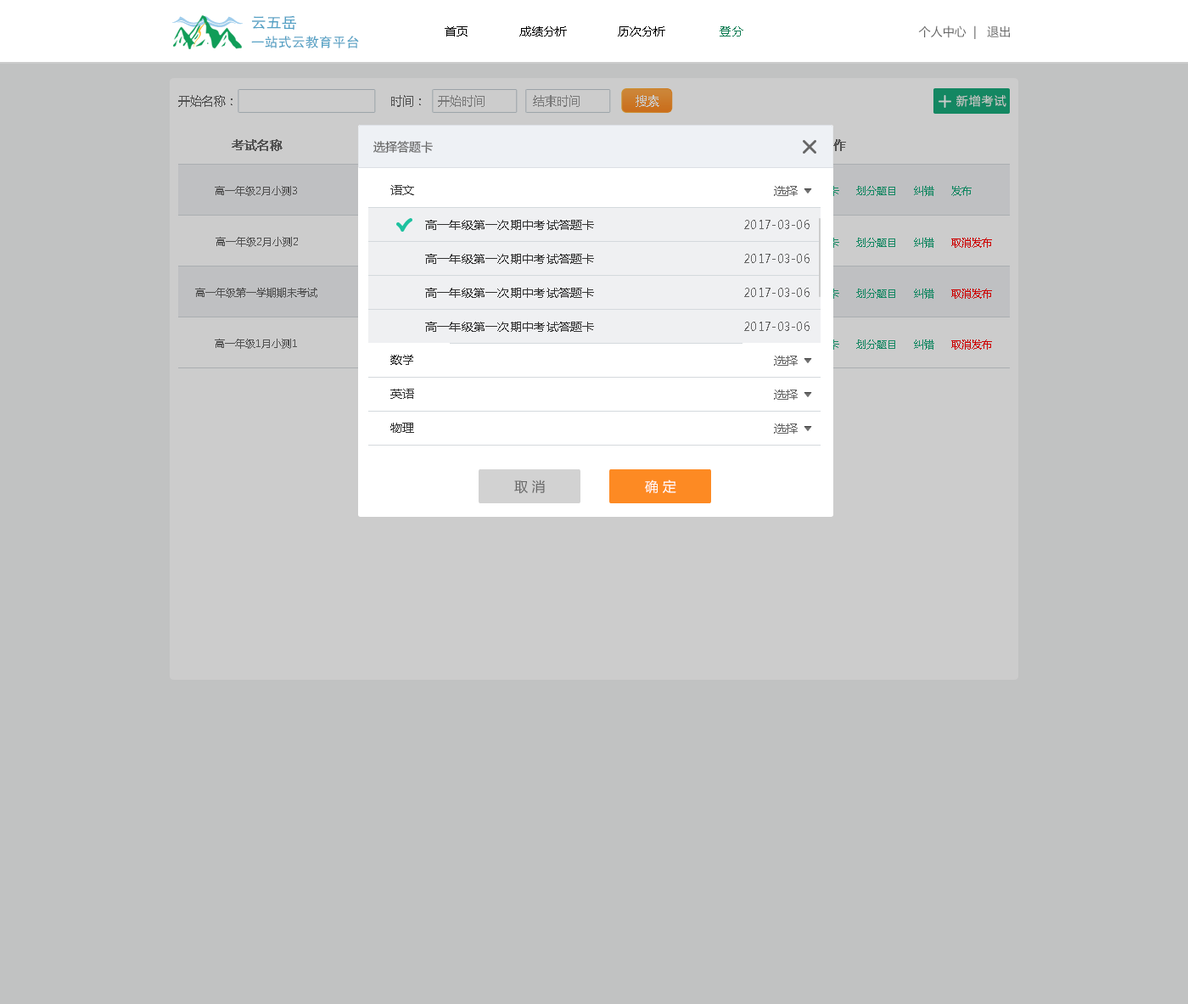
<style>
.page{position:relative;width:1188px;height:1004px;background:#c1c2c2}
.page>*{position:absolute;margin:0}
.t1{font:13.6px/20.4px "FZHTK--GBK1-0";color:#53a0c4}
.t2{font:15.3px/20.4px "FZHTK--GBK1-0";color:#53a0c4}
.t3{font:11.9px "MicrosoftYaHei";color:#000000;text-transform:uppercase}
.t4{font:11.9px "MicrosoftYaHei";color:#107d54;text-transform:uppercase}
.t5{font:11.9px "MicrosoftYaHei";color:#666666;text-transform:uppercase}
.t6{font:11.9px "MicrosoftYaHei";color:#666666}
.t7{font:11.9px "MicrosoftYaHei";color:#7a7a7a}
.t8{font:11.9px "MicrosoftYaHei";color:#cccccc}
.t9{font:11.9px "MicrosoftYaHei";letter-spacing:0.07em;color:#cccccc}
.t10{font:11.9px "MicrosoftYaHei";color:#666666;font-weight:bold}
.t11{font:11.9px "MicrosoftYaHei";font-weight:bold}
.t12{font:10.2px "MicrosoftYaHei";color:#666666}
.t13{font:11.9px "MicrosoftYaHei";letter-spacing:0.02em;color:#333333}
.t14{font:10.2px "MicrosoftYaHei"}
.t15{font:11.9px "MicrosoftYaHei";letter-spacing:0.02em;color:#666666}
.t16{font:13.6px "MicrosoftYaHei";color:#666666;text-transform:uppercase}
.t17{font:13.6px "MicrosoftYaHei";color:#ffffff;text-transform:uppercase}
</style>
<div class="page">
<p class="t1" style="left:251px;top:15px;width:108px;height:33px"><span class="t2">云五岳<br></span>一站式云教育平台</p>
<p class="t3" style="left:445px;top:26px;width:298px;height:10px">首页               成绩分析               历次分析                <span class="t4">登分</span></p>
<p class="t5" style="left:918px;top:25px;width:92px;height:14px">个人中心  |   退出</p>
<p class="t6" style="left:178px;top:95px;width:54px;height:12px">开始名称：</p>
<p class="t6" style="left:391px;top:95px;width:30px;height:12px">时间：</p>
<p class="t7" style="left:438px;top:95px;width:47px;height:12px">开始时间</p>
<p class="t7" style="left:533px;top:95px;width:47px;height:12px">结束时间</p>
<p class="t8" style="left:636px;top:95px;width:23px;height:12px">搜索</p>
<p class="t9" style="left:956px;top:95px;width:50px;height:12px">新增考试</p>
<p class="t10" style="left:232px;top:139px;width:51px;height:12px">考试名称</p>
<p class="t6" style="left:373px;top:141px;width:60px;height:13px">选择答题卡</p>
<p class="t11" style="left:821px;top:139px;width:25px;height:12px">操作</p>
<p class="t12" style="left:215px;top:186px;width:82px;height:10px">高一年级2月小测3</p>
<p class="t13" style="left:390px;top:185px;width:24px;height:10px">语文</p>
<p class="t14" style="left:693px;top:186px;width:279px;height:10px">查看考生     删除     选择答题卡     划分题目     纠错     发布</p>
<p class="t15" style="left:774px;top:186px;width:24px;height:10px">选择</p>
<p class="t13" style="left:425px;top:220px;width:384px;height:10px">高一年级第一次期中考试答题卡                                         <span class="t15">2017-03-06</span></p>
<p class="t12" style="left:216px;top:237px;width:82px;height:10px">高一年级2月小测2</p>
<p class="t14" style="left:693px;top:238px;width:299px;height:10px">查看考生     删除     选择答题卡     划分题目     纠错     取消发布</p>
<p class="t13" style="left:425px;top:254px;width:384px;height:10px">高一年级第一次期中考试答题卡                                         <span class="t15">2017-03-06</span></p>
<p class="t12" style="left:195px;top:288px;width:122px;height:10px">高一年级第一学期期末考试</p>
<p class="t13" style="left:425px;top:288px;width:384px;height:10px">高一年级第一次期中考试答题卡                                         <span class="t15">2017-03-06</span></p>
<p class="t14" style="left:693px;top:288px;width:299px;height:11px">查看考生     删除     选择答题卡     划分题目     纠错     取消发布</p>
<p class="t13" style="left:425px;top:322px;width:384px;height:10px">高一年级第一次期中考试答题卡                                         <span class="t15">2017-03-06</span></p>
<p class="t12" style="left:215px;top:339px;width:82px;height:10px">高一年级1月小测1</p>
<p class="t14" style="left:693px;top:339px;width:299px;height:11px">查看考生     删除     选择答题卡     划分题目     纠错     取消发布</p>
<p class="t13" style="left:390px;top:355px;width:23px;height:10px">数学</p>
<p class="t15" style="left:774px;top:356px;width:24px;height:10px">选择</p>
<p class="t13" style="left:390px;top:389px;width:24px;height:10px">英语</p>
<p class="t15" style="left:774px;top:389px;width:24px;height:11px">选择</p>
<p class="t13" style="left:390px;top:423px;width:24px;height:10px">物理</p>
<p class="t15" style="left:774px;top:423px;width:24px;height:11px">选择</p>
<p class="t16" style="left:514px;top:479px;width:31px;height:15px">取 消</p>
<p class="t17" style="left:645px;top:479px;width:31px;height:15px">确 定</p>
</div>
